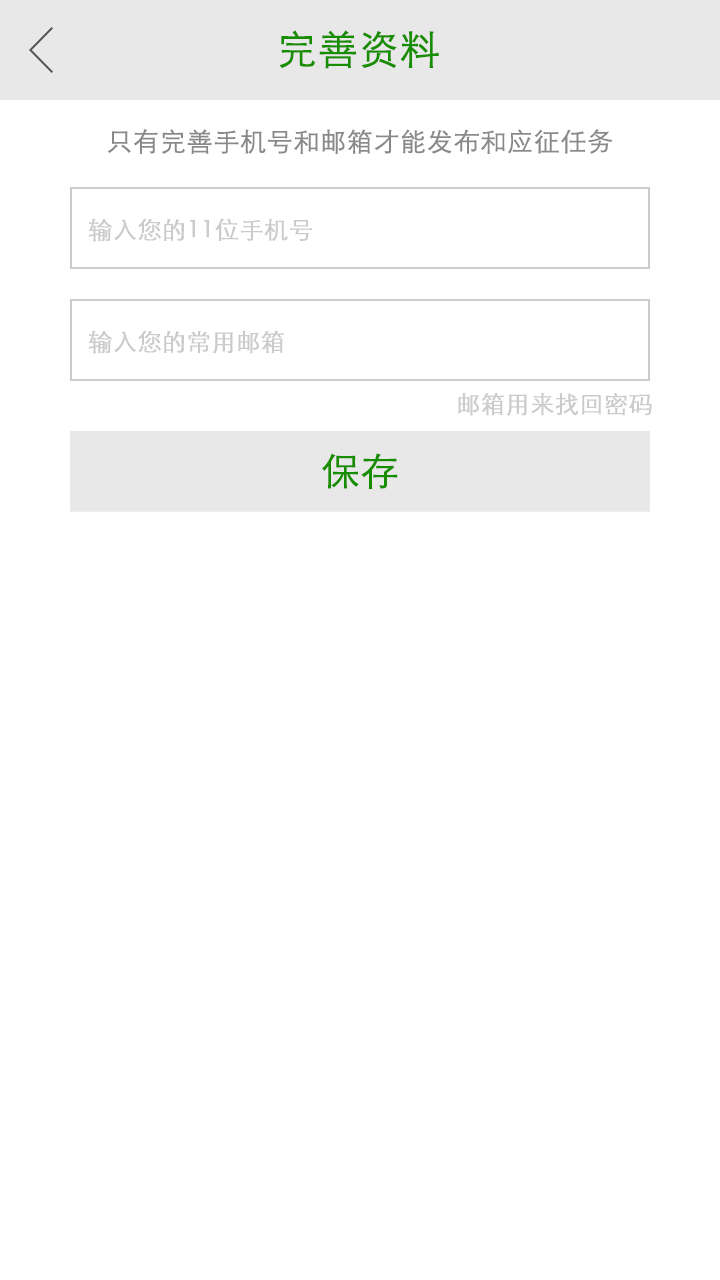
<style>
.page{position:relative;width:720px;height:1280px;background:#ffffff}
.page>*{position:absolute;margin:0}
.t1{font:40px "STXihei";color:#178d00;font-weight:bold}
.t2{font:26px "STXihei";color:#898989;font-weight:bold}
.t3{font:24px "STXihei";color:#cbcbcb;font-weight:bold}
.t4{font:38px "STXihei";color:#178d00;font-weight:bold}
</style>
<div class="page">
<p class="t1" style="left:279px;top:30px;width:160px;height:39px">完善资料</p>
<p class="t2" style="left:107px;top:129px;width:506px;height:25px">只有完善手机号和邮箱才能发布和应征任务</p>
<p class="t3" style="left:88px;top:218px;width:224px;height:24px">输入您的11位手机号</p>
<p class="t3" style="left:88px;top:330px;width:196px;height:24px">输入您的常用邮箱</p>
<p class="t3" style="left:458px;top:393px;width:194px;height:23px">邮箱用来找回密码</p>
<p class="t4" style="left:322px;top:453px;width:76px;height:36px">保存</p>
</div>
